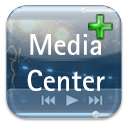
<style>
.page{position:relative;width:130px;height:130px;background:#ffffff}
.page>*{position:absolute;margin:0}
.t1{font:30px/36px "MerckSansSerifPro-Bold";color:#ffffff}
</style>
<div class="page">
<p class="t1" style="left:27px;top:34px;width:78px;height:57px;text-align:center">Media<br>Center</p>
</div>
